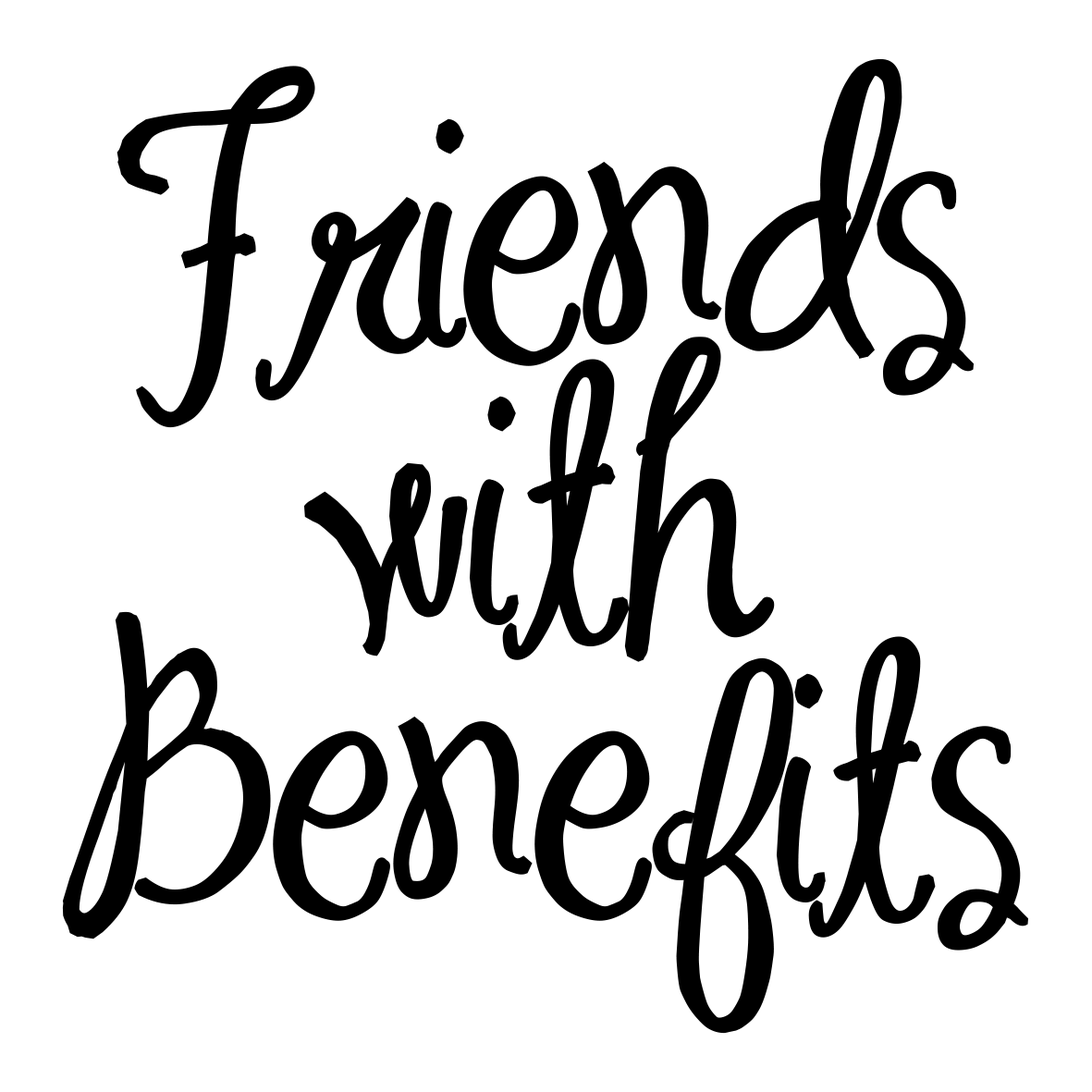
<style>
.page{position:relative;width:1092px;height:1092px;background:#ffffff}
.page>*{position:absolute;margin:0}
.t1{font:277.4px/277.4px "MASexy";color:#000000;font-weight:bold}
</style>
<div class="page">
<p class="t1" style="left:62px;top:58px;width:966px;height:976px;text-align:center">Friends<br>with<br>Benefits</p>
</div>
